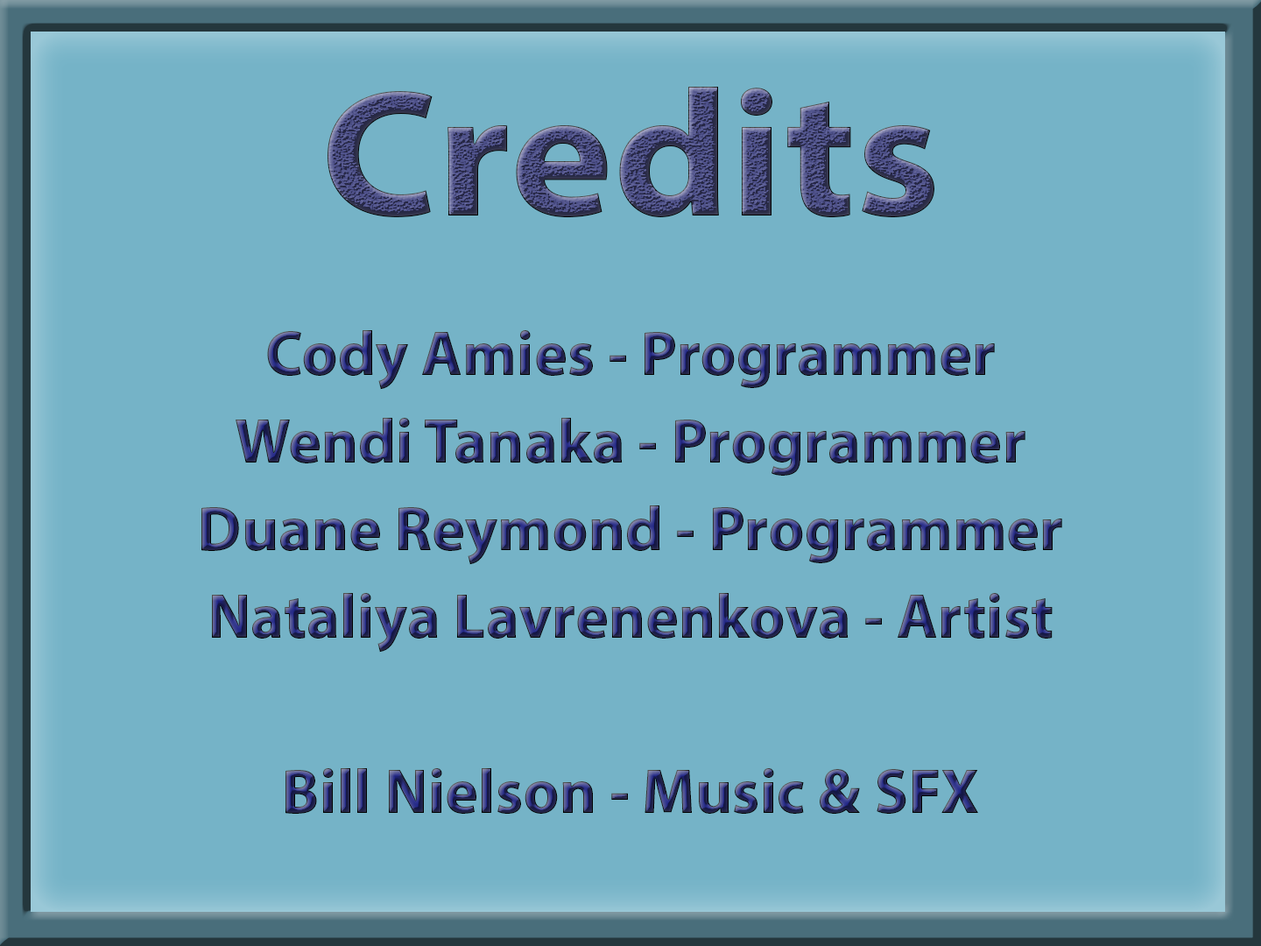
<style>
.page{position:relative;width:1261px;height:946px;background:#75b3c7}
.page>*{position:absolute;margin:0}
.t1{font:181.4px "MyriadPro-Bold";scale:1.08 1}
.t2{font:63px/87.6px "MyriadPro-Bold"}
</style>
<div class="page">
<p class="t1" style="left:327px;top:87px;width:607px;height:131px">Credits</p>
<p class="t2" style="left:201px;top:330px;width:861px;height:483px;text-align:center">Cody Amies - Programmer<br>Wendi Tanaka - Programmer<br>Duane Reymond - Programmer<br>Nataliya Lavrenenkova - Artist<br><br>Bill Nielson - Music &amp; SFX</p>
</div>
